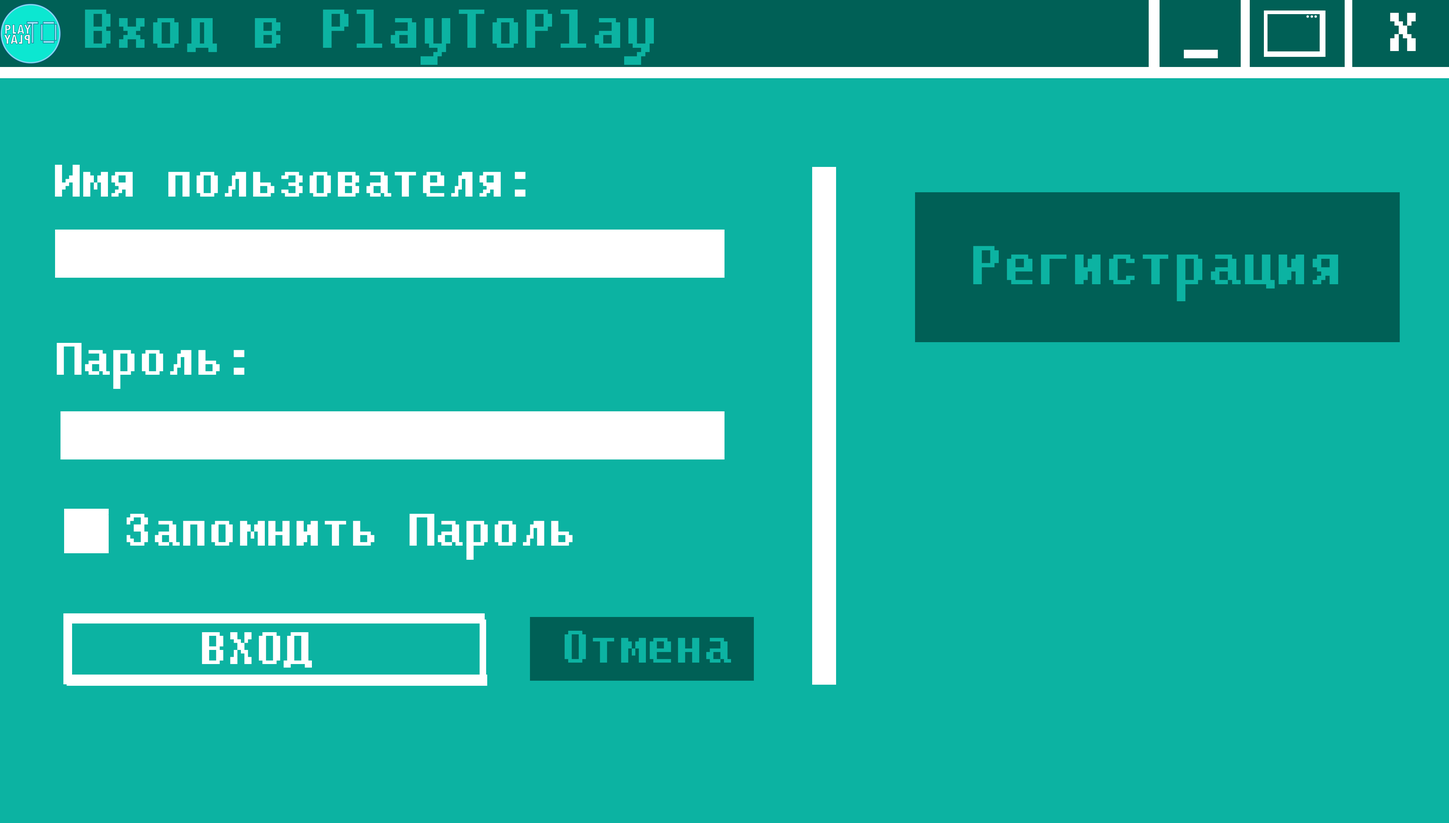
<style>
.page{position:relative;width:1449px;height:823px;background:#0cb3a2}
.page>*{position:absolute;margin:0}
.t1{font:54.3px "Fixedsys";color:#0cb3a2}
.t2{font:54.3px "Fixedsys";color:#ffffff}
.t3{font:45.3px "Fixedsys";color:#ffffff}
.t4{font:45.3px "Fixedsys";color:#0cb3a2}
</style>
<div class="page">
<p class="t1" style="left:85px;top:9px;width:569px;height:56px">Вход в PlayToPlay</p>
<p class="t2" style="left:1390px;top:13px;width:25px;height:38px">X</p>
<p class="t2" style="left:1184px;top:50px;width:34px;height:8px">_</p>
<p class="t1" style="left:973px;top:246px;width:365px;height:55px">Регистрация</p>
<p class="t3" style="left:126px;top:514px;width:447px;height:46px">Запомнить Пароль</p>
<p class="t3" style="left:202px;top:632px;width:110px;height:36px">ВХОД</p>
<p class="t4" style="left:564px;top:631px;width:167px;height:32px">Отмена</p>
</div>
